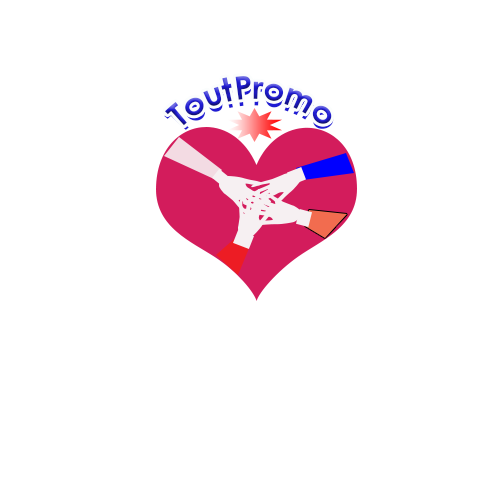
<style>
.page{position:relative;width:500px;height:500px;background:#ffffff}
.page>*{position:absolute;margin:0}
.t1{font:31.5px "CenturyGothic-Bold";letter-spacing:0.025em;scale:0.79 1}
</style>
<div class="page">
<p class="t1" style="left:165px;top:76px;width:167px;height:50px">ToutPromo</p>
<p class="t1" style="left:164px;top:81px;width:170px;height:49px">ToutPromo</p>
</div>
